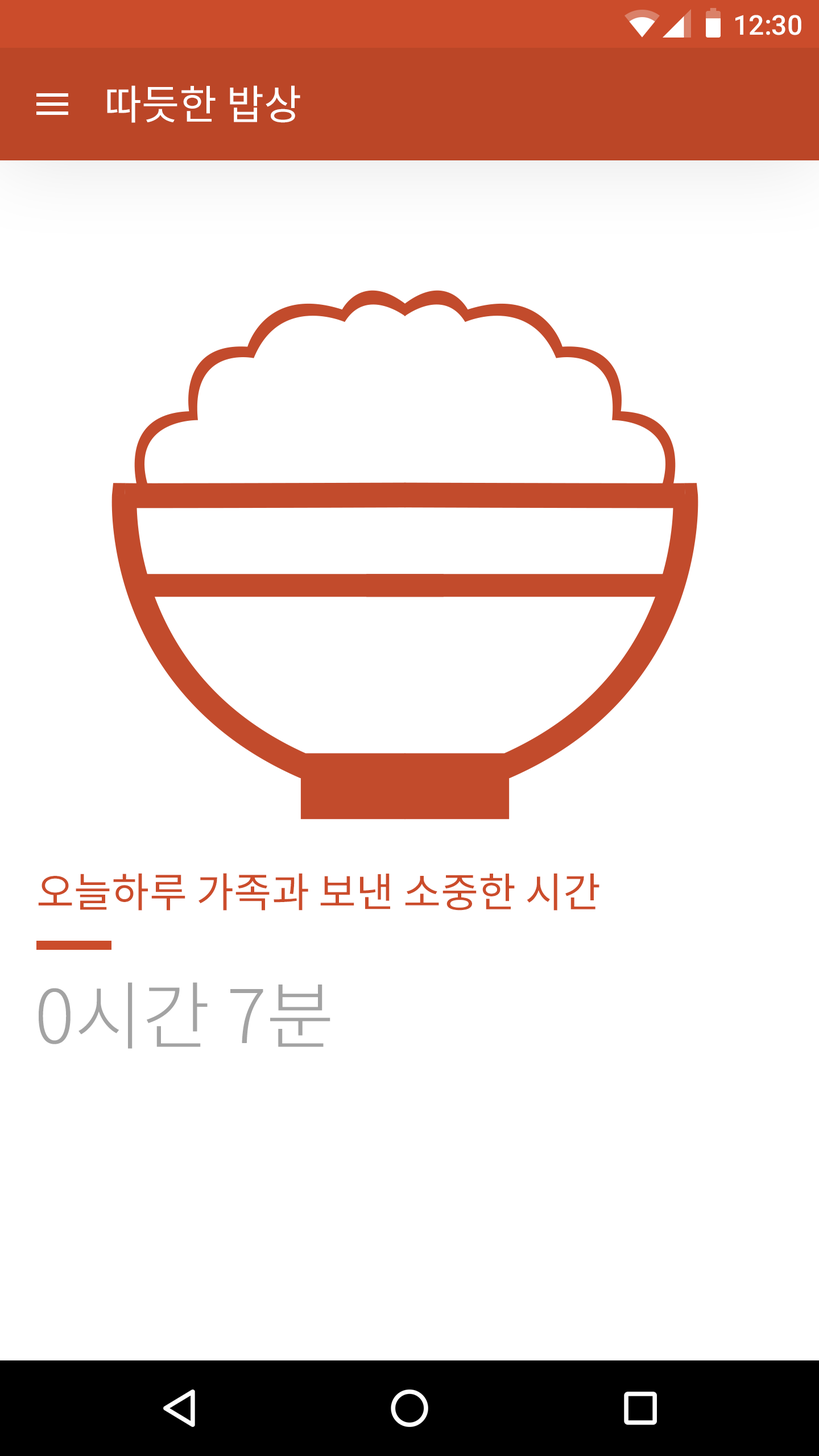
<style>
.page{position:relative;width:819px;height:1456px;background:#ffffff}
.page>*{position:absolute;margin:0}
.t1{font:27.3px "Roboto-Medium";color:#ffffff}
.t2{font:40.9px "NotoSansCJKkr-Regular";color:#ffffff}
.t3{font:40.9px "NotoSansCJKkr-Regular";color:#cb4c2b}
.t4{font:73.9px "NotoSansCJKkr-Light";color:#a3a3a3}
</style>
<div class="page">
<p class="t1" style="left:735px;top:15px;width:66px;height:20px">12:30</p>
<p class="t2" style="left:107px;top:85px;width:193px;height:38px">따듯한 밥상</p>
<p class="t3" style="left:38px;top:873px;width:561px;height:38px">오늘하루 가족과 보낸 소중한 시간</p>
<p class="t4" style="left:39px;top:982px;width:291px;height:67px">0시간 7분</p>
</div>
